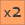
<style>
.page{position:relative;width:25px;height:25px;background:#ffa265}
.page>*{position:absolute;margin:0}
.t1{font:15.2px "Corbel";color:#3d3d3d}
.t2{font:21px "Corbel";color:#3d3d3d}
</style>
<div class="page">
<p class="t1" style="left:4px;top:10px;width:7px;height:7px">x</p>
<p class="t2" style="left:12px;top:7px;width:9px;height:10px">2</p>
</div>
